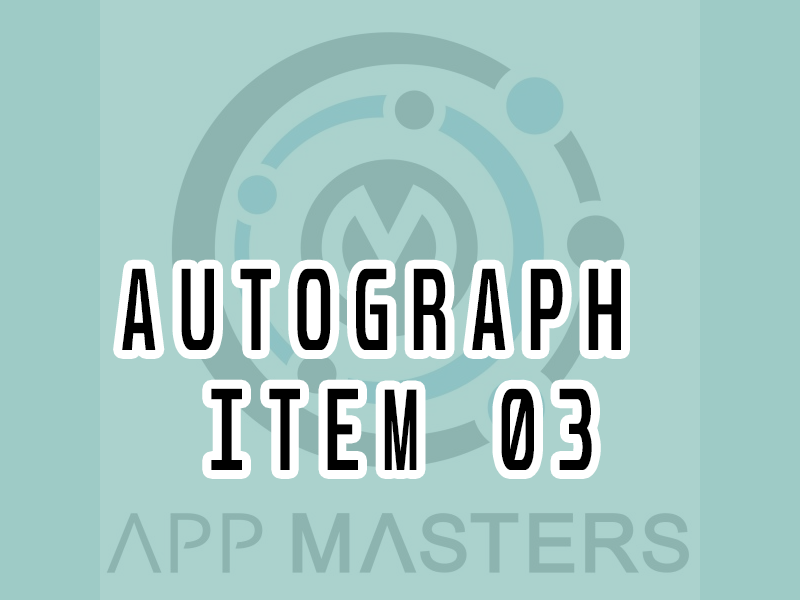
<style>
.page{position:relative;width:800px;height:600px;background:#abd2cd}
.page>*{position:absolute;margin:0}
.t1{font:100.3px/120px "Unispace-Bold";letter-spacing:0.34em;color:#000000;text-transform:uppercase;scale:0.61 1}
</style>
<div class="page">
<p class="t1" style="left:122px;top:268px;width:499px;height:202px;text-align:center">Autograph <br>Item 03</p>
</div>
